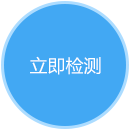
<style>
.page{position:relative;width:130px;height:130px;background:#42a8f3}
.page>*{position:absolute;margin:0}
.t1{font:18px "MicrosoftYaHei";color:#ffffff}
</style>
<div class="page">
<p class="t1" style="left:30px;top:56px;width:71px;height:19px">立即检测</p>
</div>
